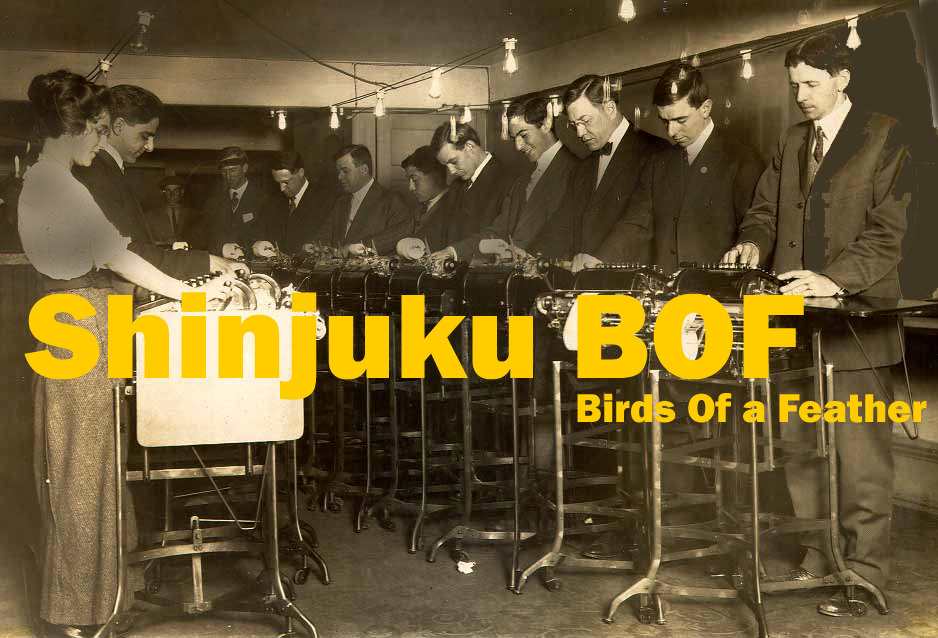
<style>
.page{position:relative;width:938px;height:638px}
.page>*{position:absolute;margin:0}
.t1{font:124.5px "FranklinGothic-Heavy";color:#ffcc00}
.t2{font:41.5px "FranklinGothic-Heavy";color:#ffcc00}
</style>
<div class="page">
<p class="t1" style="left:24px;top:292px;width:780px;height:108px">Shinjuku BOF</p>
<p class="t2" style="left:577px;top:393px;width:350px;height:30px">Birds Of a Feather</p>
</div>
